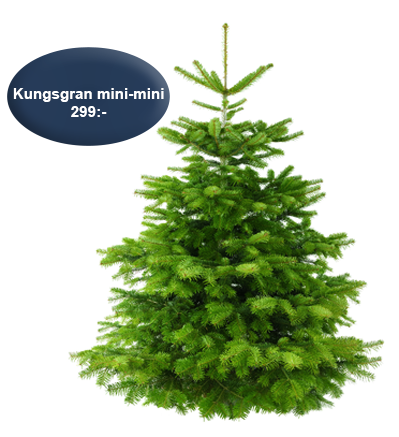
<style>
.page{position:relative;width:399px;height:437px;background:#ffffff}
.page>*{position:absolute;margin:0}
.t1{font:15.1px "Arial-BoldMT";color:#ffffff}
</style>
<div class="page">
<p class="t1" style="left:13px;top:88px;width:151px;height:29px;text-align:center">Kungsgran mini-mini<br>299:-</p>
</div>
